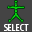
<style>
.page{position:relative;width:32px;height:32px;background:#444444}
.page>*{position:absolute;margin:0}
.t1{font:10px "MyriadPro-Cond";color:#ffffff;scale:1.14 1}
</style>
<div class="page">
<p class="t1" style="left:4px;top:24px;width:25px;height:7px">SELECT</p>
</div>
